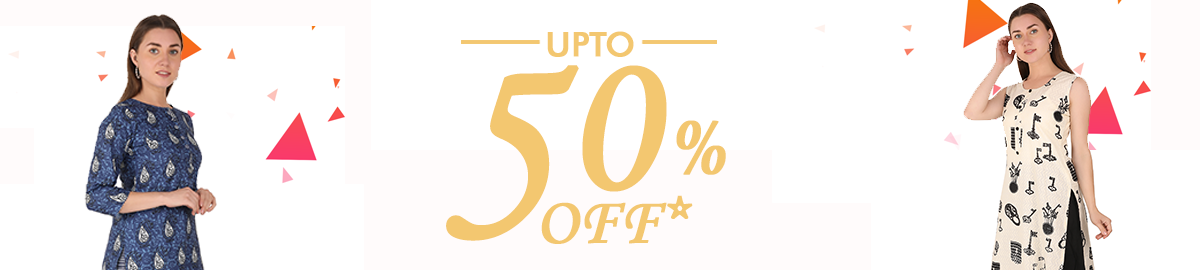
<style>
.page{position:relative;width:1200px;height:270px;background:#ffffff}
.page>*{position:absolute;margin:0}
.t1{font:33.6px "FuturaBT-Medium";letter-spacing:-0.01em;color:#f3c770;font-weight:bold}
.t2{font:279.8px "MonotypeCorsiva";letter-spacing:-0.01em;color:#f3c770;font-weight:bold}
.t3{font:205.2px "MonotypeCorsiva";letter-spacing:-0.01em;color:#f3c770;font-weight:bold}
.t4{font:89.5px "MonotypeCorsiva";letter-spacing:-0.01em;color:#f3c770;font-weight:bold}
.t5{font:67.2px "MonotypeCorsiva";letter-spacing:-0.01em;color:#f3c770;font-weight:bold}
</style>
<div class="page">
<p class="t1" style="left:547px;top:31px;width:87px;height:26px">UPTO</p>
<p class="t2" style="left:446px;top:65px;width:133px;height:176px">5</p>
<p class="t3" style="left:582px;top:65px;width:85px;height:127px">0</p>
<p class="t4" style="left:676px;top:120px;width:50px;height:55px">%</p>
<p class="t5" style="left:541px;top:195px;width:152px;height:49px">OFF*</p>
</div>
